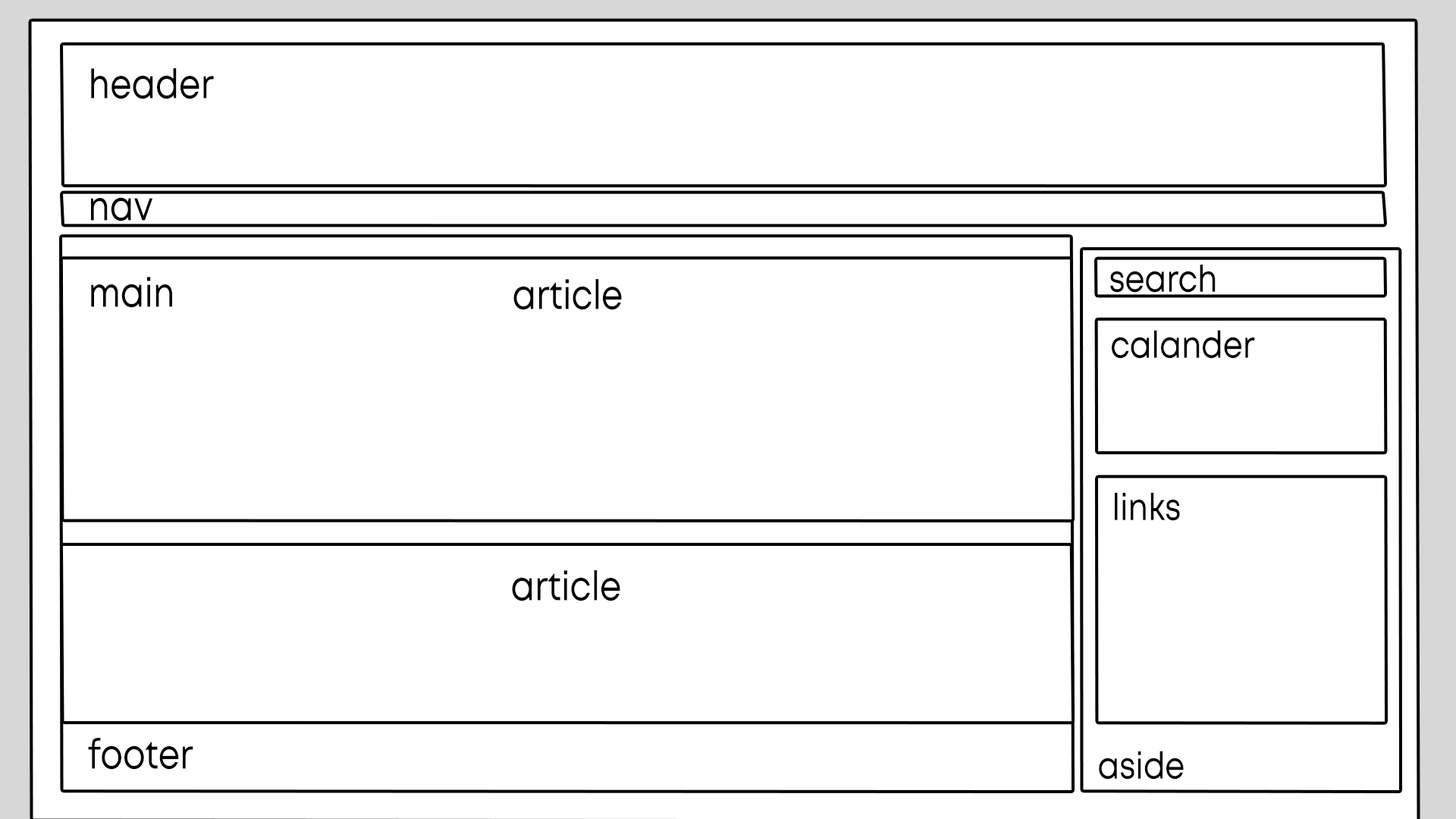
<style>
.page{position:relative;width:1456px;height:819px;background:#ffffff}
.page>*{position:absolute;margin:0}
.t1{font:40.7px "Mont-Regular";color:#000000;scale:0.84 1}
.t2{font:37.3px "Mont-Regular";color:#000000;scale:0.84 1}
</style>
<div class="page">
<p class="t1" style="left:91px;top:68px;width:123px;height:31px">header</p>
<p class="t1" style="left:91px;top:197px;width:62px;height:24px">nav</p>
<p class="t2" style="left:1110px;top:265px;width:106px;height:28px">search</p>
<p class="t1" style="left:91px;top:277px;width:81px;height:31px">main</p>
<p class="t1" style="left:513px;top:279px;width:109px;height:31px">article</p>
<p class="t2" style="left:1112px;top:330px;width:143px;height:29px">calander</p>
<p class="t2" style="left:1115px;top:492px;width:65px;height:29px">links</p>
<p class="t1" style="left:512px;top:570px;width:108px;height:31px">article</p>
<p class="t1" style="left:88px;top:738px;width:105px;height:32px">footer</p>
<p class="t2" style="left:1099px;top:751px;width:85px;height:29px">aside</p>
</div>
